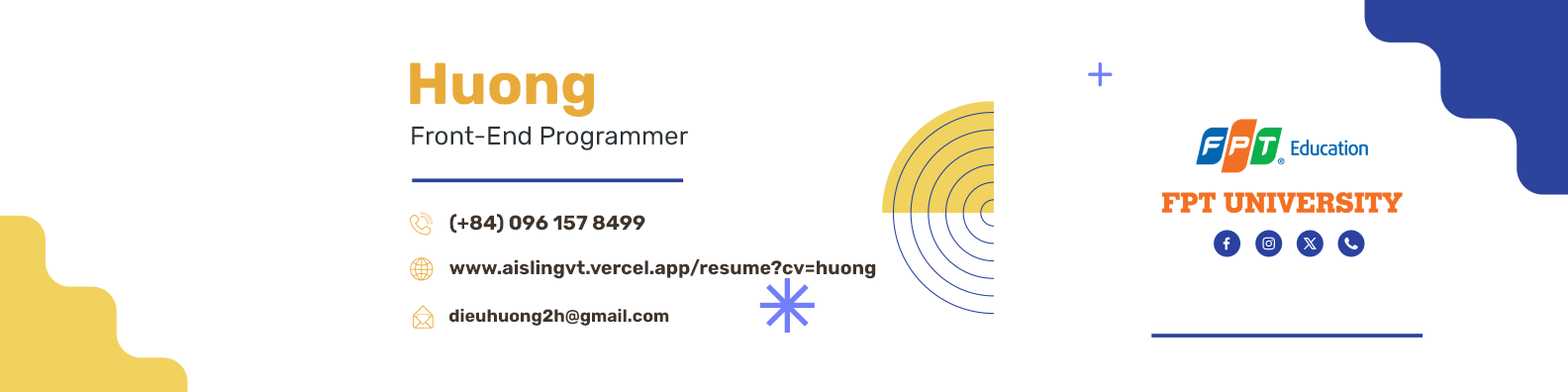
<style>
.page{position:relative;width:1568px;height:392px;background:#ffffff}
.page>*{position:absolute;margin:0}
.t1{font:58.6px "Rubik-Bold";color:#e8ab39}
.t2{font:25.7px "Rubik-Regular";color:#2e353a}
.t3{font:20.3px "Rubik-Bold";color:#3f352d}
.t4{font:19.2px "Rubik-Bold";color:#3f352d}
.t5{font:17.5px "Rubik-Bold";color:#3f352d}
</style>
<div class="page">
<p class="t1" style="left:410px;top:62px;width:184px;height:55px">Huong</p>
<p class="t2" style="left:412px;top:126px;width:276px;height:24px">Front-End Programmer</p>
<p class="t3" style="left:449px;top:214px;width:196px;height:20px">(+84) 096 157 8499</p>
<p class="t4" style="left:449px;top:258px;width:427px;height:21px">www.aislingvt.vercel.app/resume?cv=huong</p>
<p class="t5" style="left:449px;top:309px;width:220px;height:17px">dieuhuong2h@gmail.com</p>
</div>
